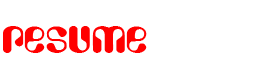
<style>
.page{position:relative;width:279px;height:68px;background:#ffffff}
.page>*{position:absolute;margin:0}
.t1{font:48px "Asimov";color:#ff0000}
</style>
<div class="page">
<p class="t1" style="left:3px;top:26px;width:144px;height:27px">resume</p>
</div>
